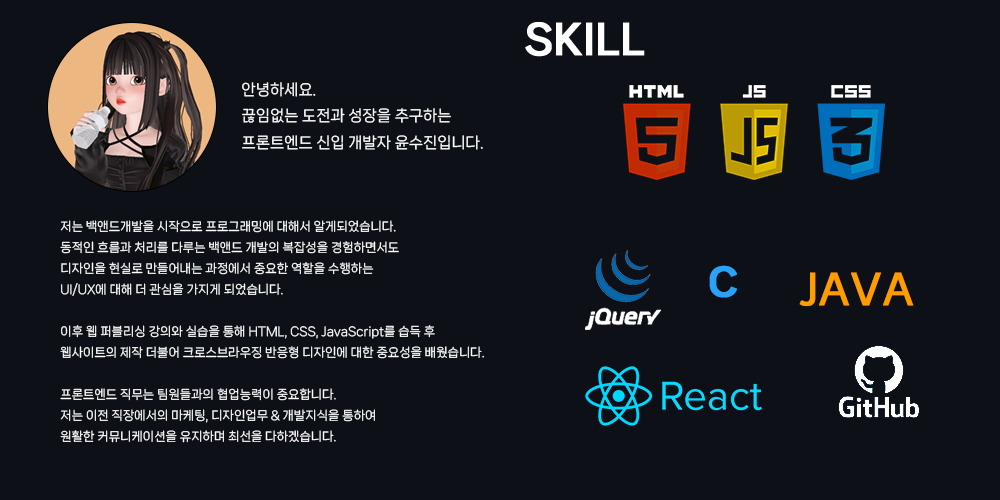
<style>
.page{position:relative;width:1000px;height:500px;background:#0d1117}
.page>*{position:absolute;margin:0}
.t1{font:15px "NanumSquareNeoTTF-bRg";color:#ffffff}
.t2{font:12px "NanumSquareNeoTTF-bRg";color:#ffffff}
.t3{font:50px "NanumSquareNeoTTF-cBd";color:#2aa2f5;font-weight:bold}
.t4{font:40px "NanumSquareNeoTTF-cBd";color:#ff9c00;font-weight:bold}
</style>
<div class="page">
<p class="t1" style="left:242px;top:82px;width:241px;height:68px">안녕하세요.<br>끊임없는 도전과 성장을 추구하는<br>프론트엔드 신입 개발자 윤수진입니다.</p>
<p class="t2" style="left:60px;top:220px;width:424px;height:223px">저는 백앤드개발을 시작으로 프로그래밍에 대해서 알게되었습니다.<br>동적인 흐름과 처리를 다루는 백앤드 개발의 복잡성을 경험하면서도<br>디자인을 현실로 만들어내는 과정에서 중요한 역할을 수행하는<br>UI/UX에 대해 더 관심을 가지게 되었습니다.<br><br>이후 웹 퍼블리싱 강의와 실습을 통해 HTML, CSS, JavaScript를 습득 후<br>웹사이트의 제작 더불어 크로스브라우징 반응형 디자인에 대한 중요성을 배웠습니다.<br><br>프론트엔드 직무는 팀원들과의 협업능력이 중요합니다.<br>저는 이전 직장에서의 마케팅, 디자인업무 &amp; 개발지식을 통하여<br>원활한 커뮤니케이션을 유지하며 최선을 다하겠습니다.</p>
<p class="t3" style="left:709px;top:265px;width:28px;height:33px">c</p>
<p class="t4" style="left:799px;top:272px;width:115px;height:34px">JAVA</p>
</div>
